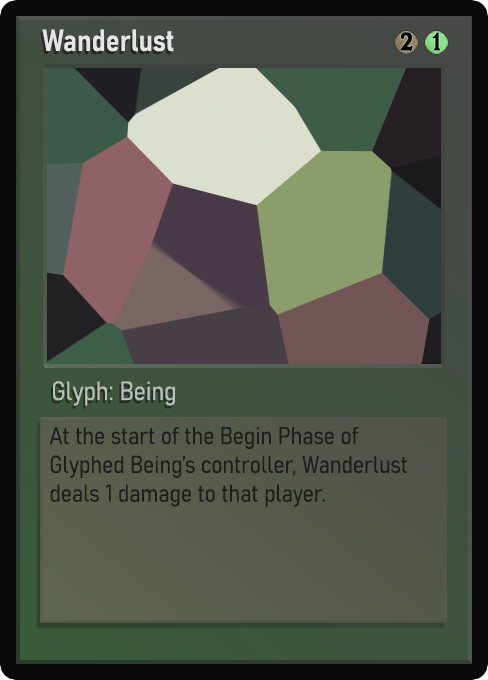
<style>
.page{position:relative;width:488px;height:680px}
.page>*{position:absolute;margin:0}
.t1{font:30px "Bahnschrift-SemiBoldSemiCondensed";color:#f2f2f2;font-weight:bold}
.t2{font:25px "WTRRoycroft";color:#000000;font-weight:bold;scale:1.09 1}
.t3{font:26px "Bahnschrift-LightSemiCondensed";color:#c8c8c8;font-weight:bold}
.t4{font:24px "Bahnschrift-LightSemiCondensed";color:#1e1e1e;font-weight:bold}
</style>
<div class="page">
<p class="t1" style="left:42px;top:29px;width:132px;height:23px;opacity:0.9">Wanderlust</p>
<p class="t2" style="left:400px;top:32px;width:13px;height:19px">2</p>
<p class="t2" style="left:432px;top:32px;width:9px;height:19px">1</p>
<p class="t3" style="left:53px;top:381px;width:122px;height:25px;opacity:0.9">Glyph: Being</p>
<p class="t4" style="left:49px;top:427px;width:358px;height:80px">At the start of the Begin Phase of Glyphed Being’s controller, Wanderlust deals 1 damage to that player.</p>
</div>
